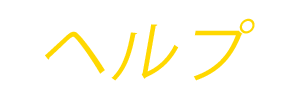
<style>
.page{position:relative;width:300px;height:100px;background:#ffffff}
.page>*{position:absolute;margin:0}
.t1{font:66.7px "KozGoPr6N-Regular";letter-spacing:0.05em;color:#ffd800;font-style:italic}
</style>
<div class="page">
<p class="t1" style="left:45px;top:18px;width:210px;height:63px">ヘルプ</p>
</div>
